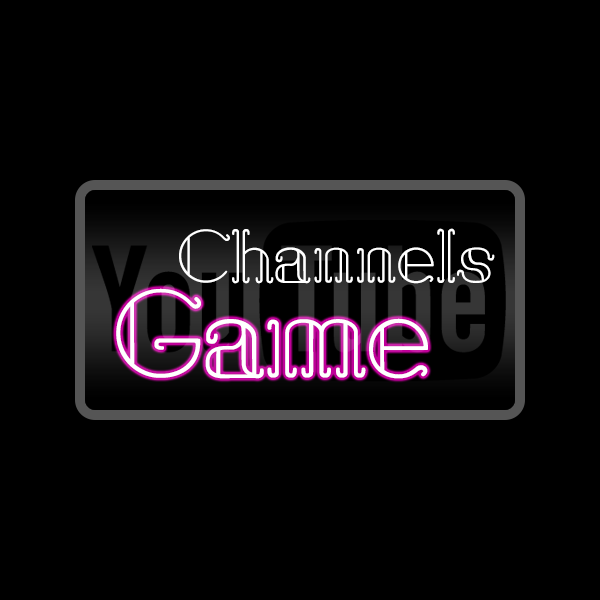
<style>
.page{position:relative;width:600px;height:600px;background:#000000}
.page>*{position:absolute;margin:0}
.t1{font:72.3px "SailAway";color:#ffffff}
.t2{font:120px "SailAway";color:#ffffff}
</style>
<div class="page">
<p class="t1" style="left:179px;top:228px;width:316px;height:56px">Channels</p>
<p class="t2" style="left:116px;top:288px;width:312px;height:91px">Game</p>
</div>
